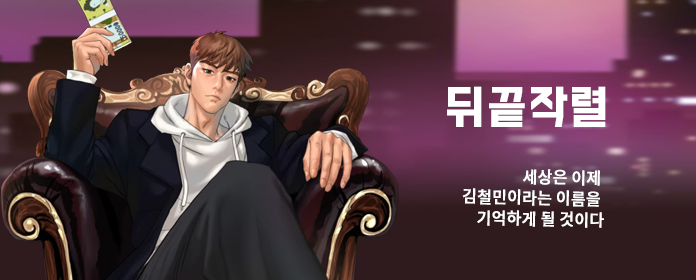
<style>
.page{position:relative;width:696px;height:280px}
.page>*{position:absolute;margin:0}
.t1{font:42px "BMDoHyeon";letter-spacing:0.05em;color:#ffffff;font-weight:bold;scale:0.95 1}
.t2{font:16.8px/21px "NotoSansKR-Medium";letter-spacing:-0.01em;color:#ffffff;font-weight:bold;scale:0.95 1}
</style>
<div class="page">
<p class="t1" style="left:447px;top:86px;width:159px;height:41px">뒤끝작렬</p>
<p class="t2" style="left:462px;top:169px;width:142px;height:59px;text-align:right;rotate:1deg">세상은 이제 <br>김철민이라는 이름을 <br>기억하게 될 것이다</p>
</div>
